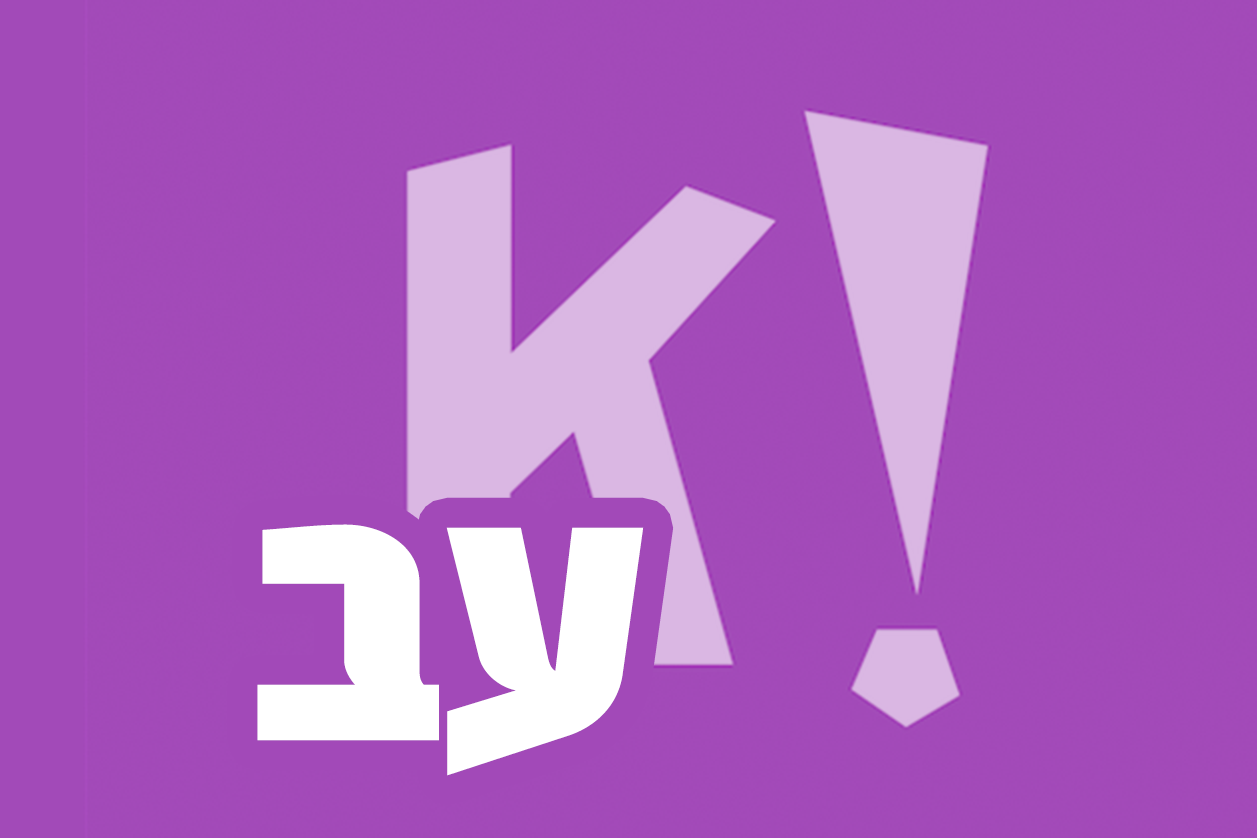
<style>
.page{position:relative;width:1257px;height:838px;background:#a24ab8}
.page>*{position:absolute;margin:0}
.t1{font:442.2px "OSAran-800";color:#ffffff}
</style>
<div class="page">
<p class="t1" style="left:257px;top:524px;width:387px;height:252px">עב</p>
</div>
